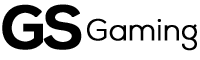
<style>
.page{position:relative;width:200px;height:60px;background:#ffffff}
.page>*{position:absolute;margin:0}
.t1{font:60px "NexaBold";color:#000000;font-weight:bold}
.t2{font:30px "NexaLight";color:#000000;font-weight:bold}
</style>
<div class="page">
<p class="t1" style="left:2px;top:4px;width:41px;height:46px">G</p>
<p class="t1" style="left:43px;top:4px;width:39px;height:46px">S</p>
<p class="t2" style="left:87px;top:18px;width:110px;height:33px">Gaming</p>
</div>
